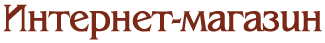
<style>
.page{position:relative;width:325px;height:43px;background:#ffffff}
.page>*{position:absolute;margin:0}
.t1{font:39.6px "BangkokPlain";letter-spacing:-0.05em;color:#7b2916;font-weight:bold;scale:0.91 1}
</style>
<div class="page">
<p class="t1" style="left:3px;top:4px;width:319px;height:36px">Интернет-магазин</p>
</div>
